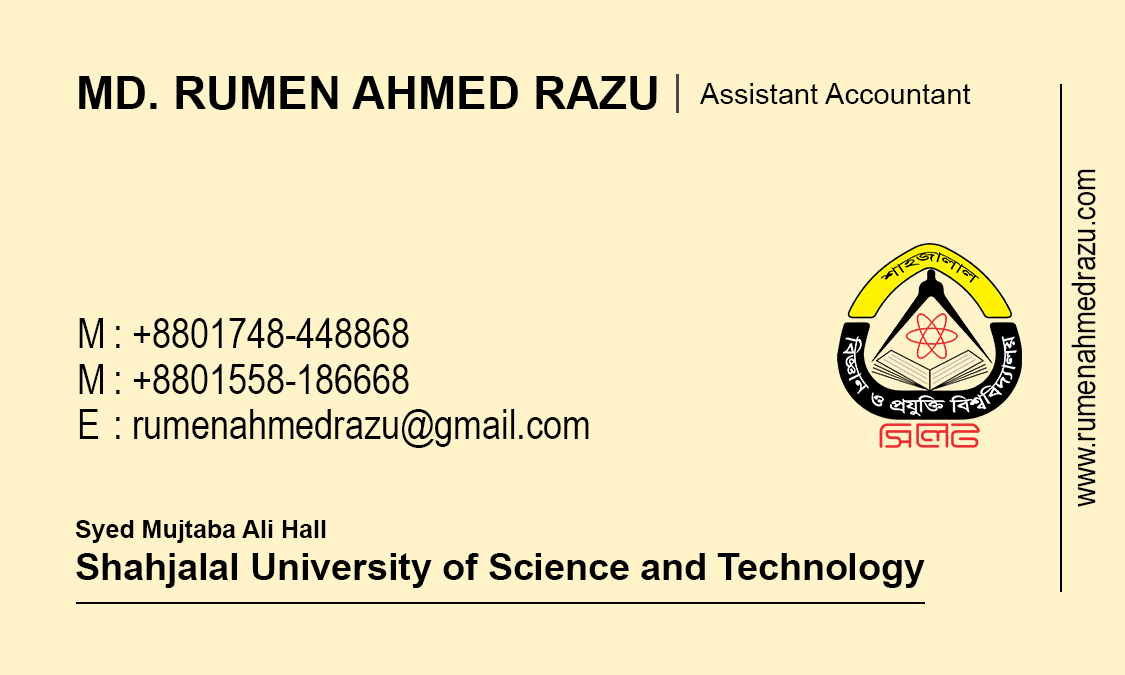
<style>
.page{position:relative;width:1125px;height:675px;background:#fff3c9}
.page>*{position:absolute;margin:0}
.t1{font:45.8px "Arial-BoldMT";color:#000000}
.t2{font:29.2px "ArialMT";color:#000000}
.t3{font:33.3px "ArialNarrow";color:#000000}
.t4{font:41.7px/45.8px "ArialNarrow";color:#000000}
.t5{font:37.5px/41.7px "Arial-BoldMT";color:#000000}
.t6{font:25px/29.2px "Arial-BoldMT";color:#000000}
</style>
<div class="page">
<p class="t1" style="left:79px;top:76px;width:578px;height:34px">MD. RUMEN AHMED RAZU</p>
<p class="t2" style="left:700px;top:83px;width:271px;height:21px">Assistant Accountant</p>
<p class="t3" style="left:1071px;top:169px;width:25px;height:338px;rotate:-90deg">www.rumenahmedrazu.com</p>
<p class="t4" style="left:79px;top:318px;width:510px;height:130px">M : +8801748-448868 <br>M : +8801558-186668<br>E : rumenahmedrazu@gmail.com</p>
<p class="t5" style="left:75px;top:520px;width:850px;height:68px"><span class="t6">Syed Mujtaba Ali Hall<br></span>Shahjalal University of Science and Technology</p>
</div>
